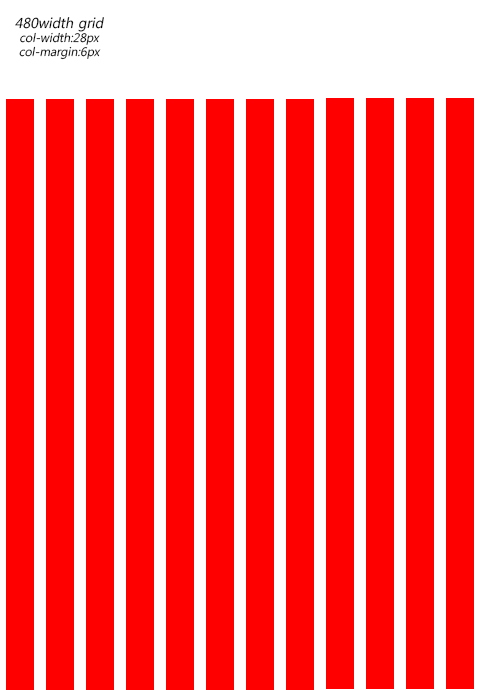
<style>
.page{position:relative;width:480px;height:690px;background:#ff0000}
.page>*{position:absolute;margin:0}
.t1{font:12px/14px "MalgunGothicRegular";color:#000000;font-style:italic}
.t2{font:14px/14px "MalgunGothicRegular";color:#000000;font-style:italic}
</style>
<div class="page">
<p class="t1" style="left:15px;top:17px;width:89px;height:43px;text-align:center"><span class="t2">480width grid<br></span>col-width:28px<br>col-margin:6px</p>
</div>
